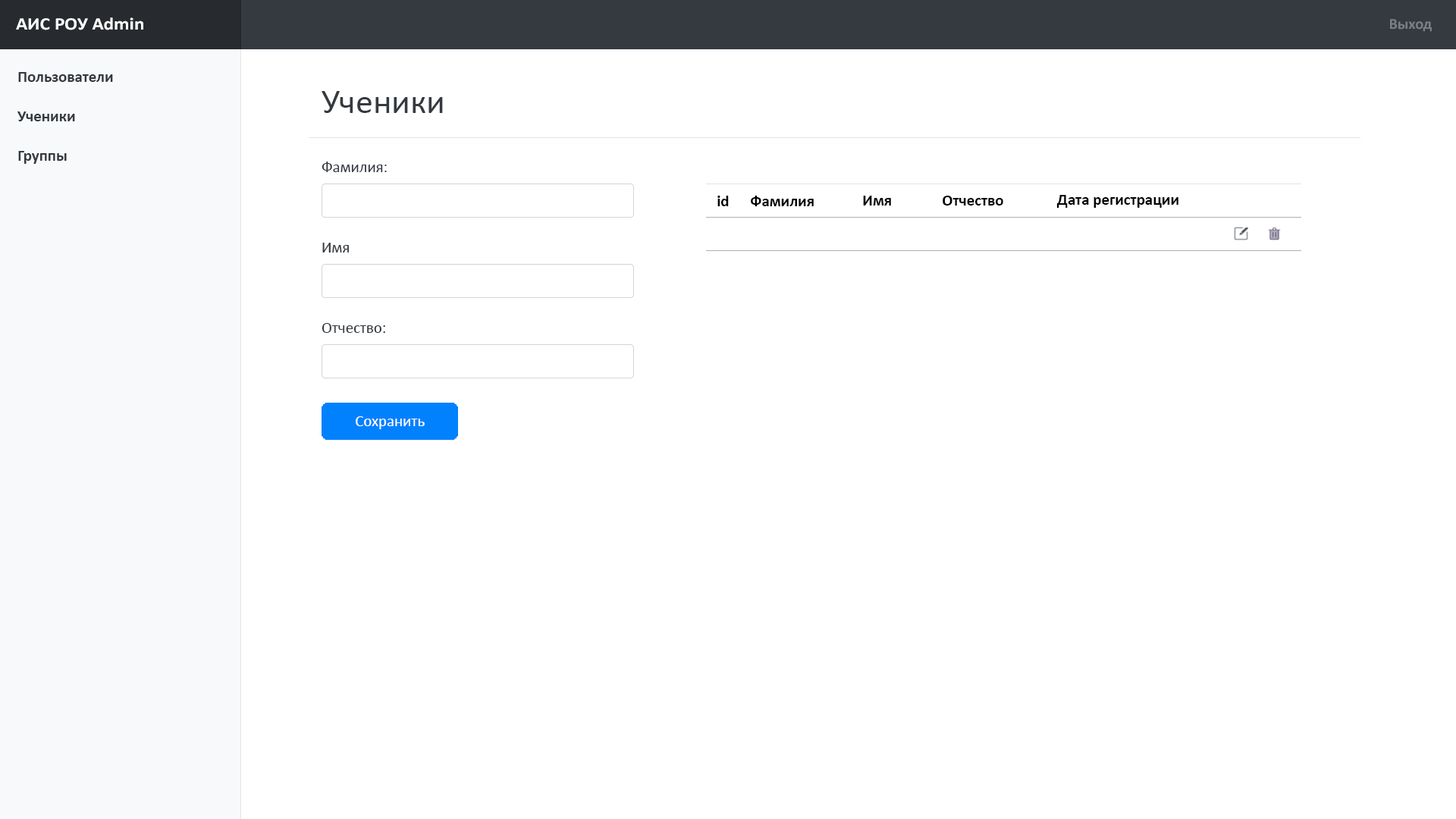
<style>
.page{position:relative;width:1456px;height:819px;background:#ffffff}
.page>*{position:absolute;margin:0}
.t1{font:17.7px "Calibri-Bold";color:#ffffff;scale:1.08 1}
.t2{font:15.4px "Calibri-Bold";color:#797f85}
.t3{font:15.8px "Calibri-Bold";color:#343a40}
.t4{font:34.8px "Calibri";color:#343a40}
.t5{font:15.8px "Calibri";color:#343a40}
.t6{font:15.8px "Calibri-Bold";color:#000000}
.t7{font:15.8px "Calibri";color:#ffffff}
</style>
<div class="page">
<p class="t1" style="left:16px;top:17px;width:127px;height:13px">АИС РОУ Admin</p>
<p class="t2" style="left:1390px;top:19px;width:42px;height:13px">Выход</p>
<p class="t3" style="left:18px;top:72px;width:95px;height:10px">Пользователи</p>
<p class="t4" style="left:322px;top:91px;width:121px;height:22px">Ученики</p>
<p class="t3" style="left:17px;top:111px;width:58px;height:10px">Ученики</p>
<p class="t3" style="left:18px;top:151px;width:49px;height:13px">Группы</p>
<p class="t5" style="left:322px;top:162px;width:65px;height:10px">Фамилия:</p>
<p class="t6" style="left:717px;top:196px;width:12px;height:10px">id</p>
<p class="t6" style="left:751px;top:196px;width:63px;height:10px">Фамилия</p>
<p class="t6" style="left:863px;top:196px;width:28px;height:10px">Имя</p>
<p class="t6" style="left:943px;top:196px;width:60px;height:10px">Отчество</p>
<p class="t6" style="left:1056px;top:195px;width:122px;height:13px">Дата регистрации</p>
<p class="t5" style="left:322px;top:243px;width:27px;height:10px">Имя</p>
<p class="t5" style="left:322px;top:323px;width:63px;height:10px">Отчество:</p>
<p class="t7" style="left:356px;top:416px;width:69px;height:13px">Сохранить</p>
</div>
